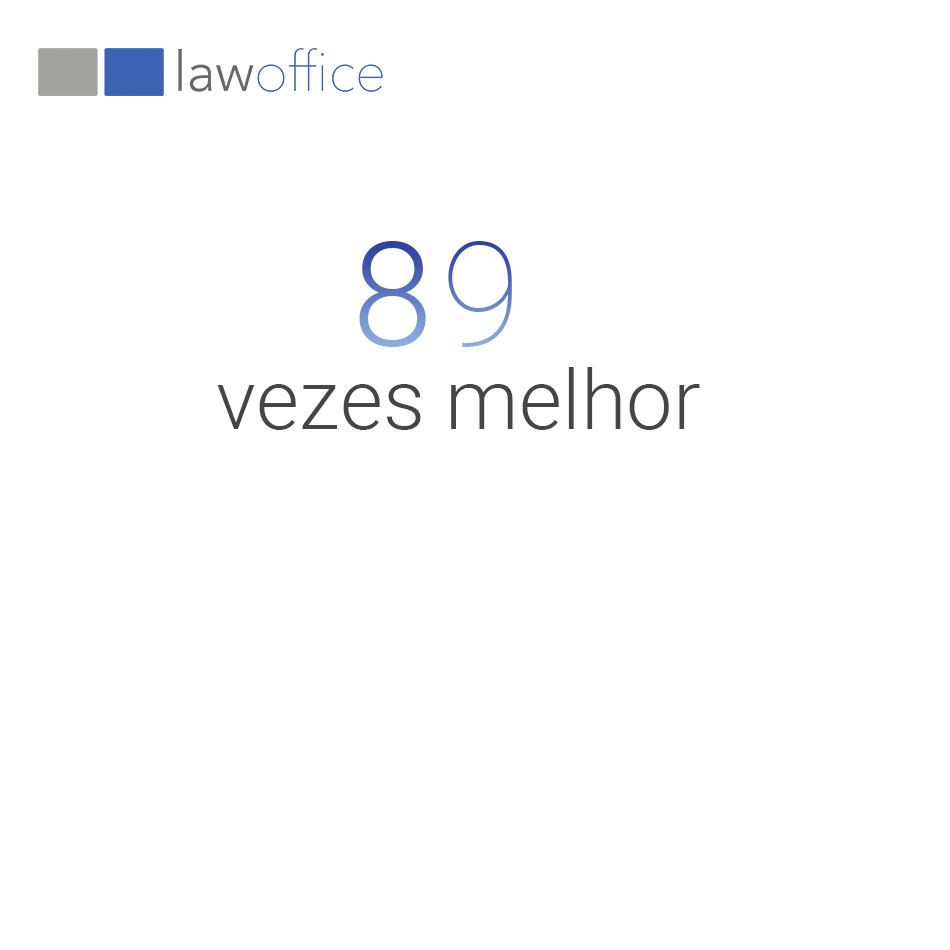
<style>
.page{position:relative;width:950px;height:950px;background:#ffffff}
.page>*{position:absolute;margin:0}
.t1{font:145.8px "Roboto-Light"}
.t2{font:145.8px "Roboto-Thin"}
.t3{font:83.3px "Roboto-Light";color:#454545}
</style>
<div class="page">
<p class="t1" style="left:359px;top:241px;width:67px;height:106px">8</p>
<p class="t2" style="left:448px;top:241px;width:64px;height:106px">9</p>
<p class="t3" style="left:217px;top:367px;width:483px;height:63px">vezes melhor</p>
</div>
